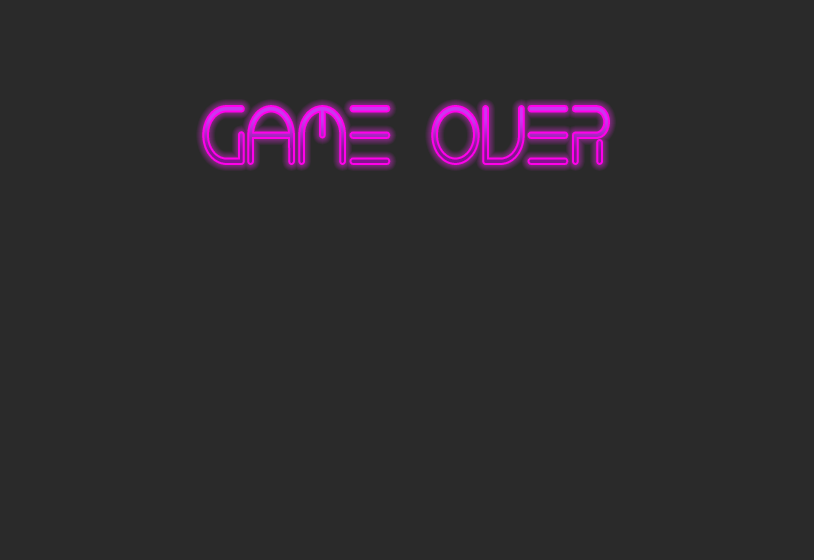
<style>
.page{position:relative;width:814px;height:560px;background:#2a2a2a}
.page>*{position:absolute;margin:0}
.t1{font:74.3px "NEONCLUBMUSIC";scale:0.79 1}
</style>
<div class="page">
<p class="t1" style="left:204px;top:107px;width:404px;height:56px">Game over</p>
</div>
